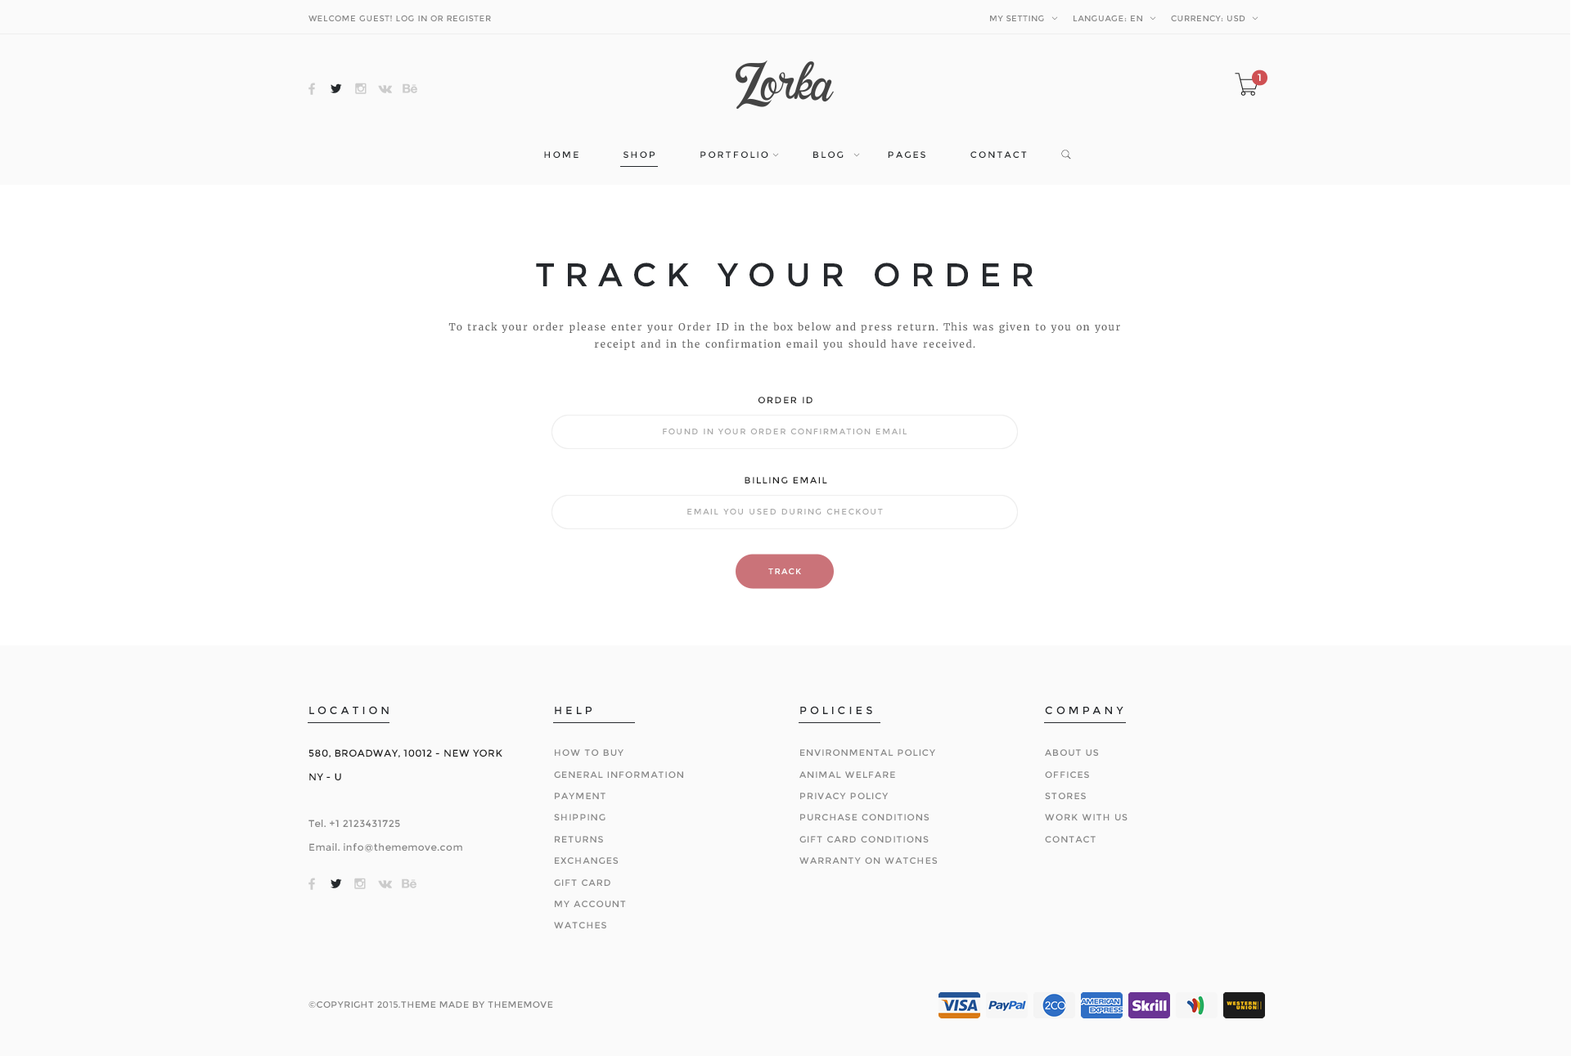
<style>
.page{position:relative;width:1571px;height:1056px;background:#fafafa}
.page>*{position:absolute;margin:0}
.t1{font:8.2px "Montserrat-Regular";letter-spacing:0.05em;color:#888888}
.t2{font:9.8px "Montserrat-Regular";letter-spacing:0.3em;color:#ffffff}
.t3{font:9px "Montserrat-Regular";letter-spacing:0.2em;color:#25292c}
.t4{font:32.7px "Montserrat-Regular";letter-spacing:0.3em;color:#25282c}
.t5{font:9.8px/17.7px "Merriweather-Regular";letter-spacing:0.1em;color:#666666}
.t6{font:9px "Montserrat-Regular";letter-spacing:0.15em;color:#222222}
.t7{font:8.2px "Montserrat-Regular";letter-spacing:0.15em;color:#aaaaaa}
.t8{font:9px "Montserrat-Regular";letter-spacing:0.15em;color:#212121}
.t9{font:8.2px "Montserrat-Regular";letter-spacing:0.15em;color:#ffffff}
.t10{font:10.6px "Montserrat-Regular";letter-spacing:0.3em;color:#25282c}
.t11{font:9.8px/23.6px "Montserrat-Regular";letter-spacing:0.04em;color:#868686}
.t12{font:9.8px/23.6px "Montserrat-Regular";letter-spacing:0.04em;color:#202020}
.t13{font:9px/21.6px "Montserrat-Regular";letter-spacing:0.1em;color:#888888}
.t14{font:9px/21.6px "Montserrat-Regular";letter-spacing:0.1em;color:#878787}
.t15{font:9px "Montserrat-Regular";letter-spacing:0.04em;color:#868686}
</style>
<div class="page">
<p class="t1" style="left:308px;top:15px;width:183px;height:6px">WELCOME GUEST! LOG IN OR REGISTER</p>
<p class="t1" style="left:990px;top:15px;width:54px;height:6px">MY SETTING</p>
<p class="t1" style="left:1073px;top:15px;width:69px;height:6px">LANGUAGE: EN</p>
<p class="t1" style="left:1171px;top:15px;width:74px;height:6px">CURRENCY: USD</p>
<p class="t2" style="left:1258px;top:74px;width:3px;height:7px">1</p>
<p class="t3" style="left:544px;top:151px;width:483px;height:7px">HOME          SHOP          PORTFOLIO          BLOG          PAGES          CONTACT</p>
<p class="t4" style="left:536px;top:263px;width:497px;height:24px">TRACK YOUR ORDER</p>
<p class="t5" style="left:448px;top:322px;width:672px;height:28px;text-align:center">To track your order please enter your Order ID in the box below and press return. This was given to you on your receipt and in the confirmation email you should have received.</p>
<p class="t6" style="left:758px;top:397px;width:54px;height:6px">ORDER ID</p>
<p class="t7" style="left:663px;top:428px;width:244px;height:6px">FOUND IN YOUR ORDER CONFIRMATION EMAIL</p>
<p class="t8" style="left:745px;top:477px;width:82px;height:7px">BILLING EMAIL</p>
<p class="t7" style="left:687px;top:508px;width:196px;height:7px">EMAIL YOU USED DURING CHECKOUT</p>
<p class="t9" style="left:768px;top:568px;width:33px;height:6px">TRACK</p>
<p class="t10" style="left:309px;top:706px;width:80px;height:8px">LOCATION</p>
<p class="t10" style="left:555px;top:707px;width:37px;height:7px">HELP</p>
<p class="t10" style="left:800px;top:706px;width:72px;height:8px">POLICIES</p>
<p class="t10" style="left:1045px;top:706px;width:78px;height:8px">COMPANY</p>
<p class="t11" style="left:308px;top:749px;width:194px;height:104px"><span class="t12">580, BROADWAY, 10012 - NEW YORK <br>NY - U<br><br></span>Tel. +1 2123431725<br>Email. info@thememove.com</p>
<p class="t13" style="left:554px;top:749px;width:129px;height:180px">HOW TO BUY<br>GENERAL INFORMATION<br>PAYMENT<br>SHIPPING<br>RETURNS<br>EXCHANGES<br>GIFT CARD<br>MY ACCOUNT<br>WATCHES</p>
<p class="t13" style="left:799px;top:749px;width:139px;height:115px">ENVIRONMENTAL POLICY<br>ANIMAL WELFARE<br>PRIVACY POLICY<br>PURCHASE CONDITIONS<br>GIFT CARD CONDITIONS<br>WARRANTY ON WATCHES</p>
<p class="t14" style="left:1045px;top:749px;width:82px;height:94px">ABOUT US<br>OFFICES<br>STORES<br>WORK WITH US<br>CONTACT</p>
<p class="t15" style="left:308px;top:1001px;width:245px;height:8px">©COPYRIGHT 2015.THEME MADE BY THEMEMOVE</p>
</div>
